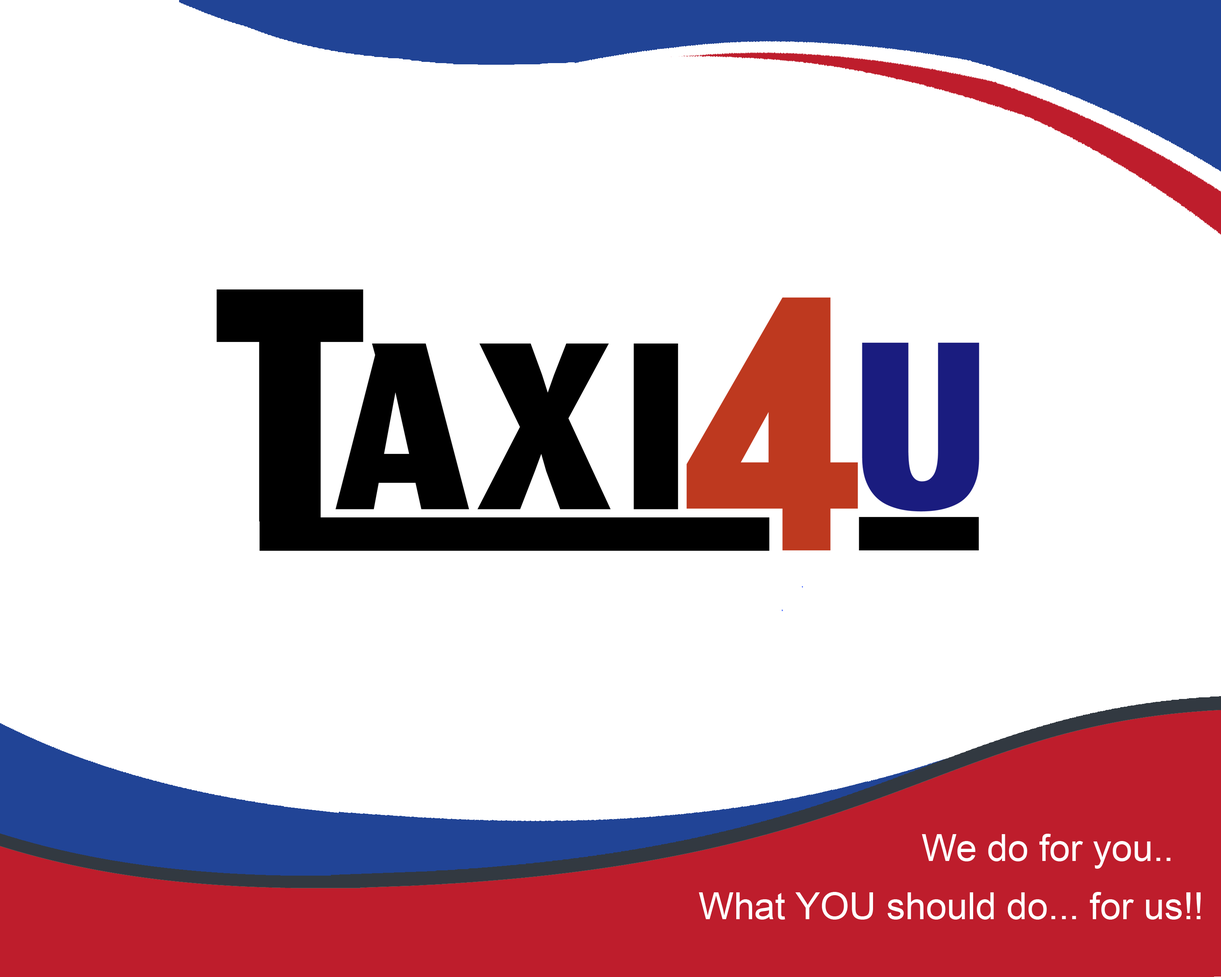
<style>
.page{position:relative;width:1221px;height:977px;background:#ffffff}
.page>*{position:absolute;margin:0}
.t1{font:37.3px "ArialMT";color:#ffffff}
</style>
<div class="page">
<p class="t1" style="left:922px;top:833px;width:248px;height:35px">We do for you..</p>
<p class="t1" style="left:699px;top:892px;width:502px;height:27px">What YOU should do... for us!!</p>
</div>
